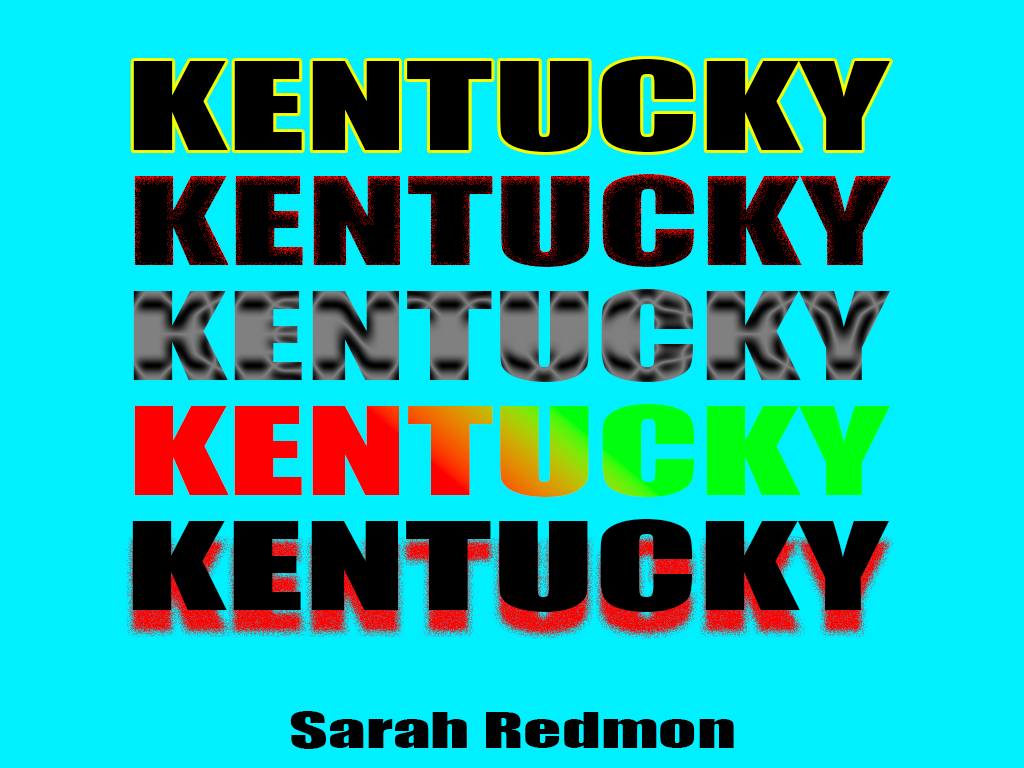
<style>
.page{position:relative;width:1024px;height:768px;background:#00f0ff}
.page>*{position:absolute;margin:0}
.t1{font:112.5px "Impact";color:#000000;scale:1.67 1}
.t2{font:112.5px "Impact";scale:1.67 1}
.t3{font:45px "Impact";color:#000000;scale:1.67 1}
</style>
<div class="page">
<p class="t1" style="left:133px;top:59px;width:757px;height:93px">KENTUCKY</p>
<p class="t1" style="left:134px;top:174px;width:757px;height:93px">KENTUCKY</p>
<p class="t2" style="left:133px;top:289px;width:757px;height:93px">KENTUCKY</p>
<p class="t2" style="left:134px;top:404px;width:756px;height:93px">KENTUCKY</p>
<p class="t1" style="left:132px;top:519px;width:757px;height:93px">KENTUCKY</p>
<p class="t3" style="left:290px;top:711px;width:444px;height:38px">Sarah Redmon</p>
</div>
